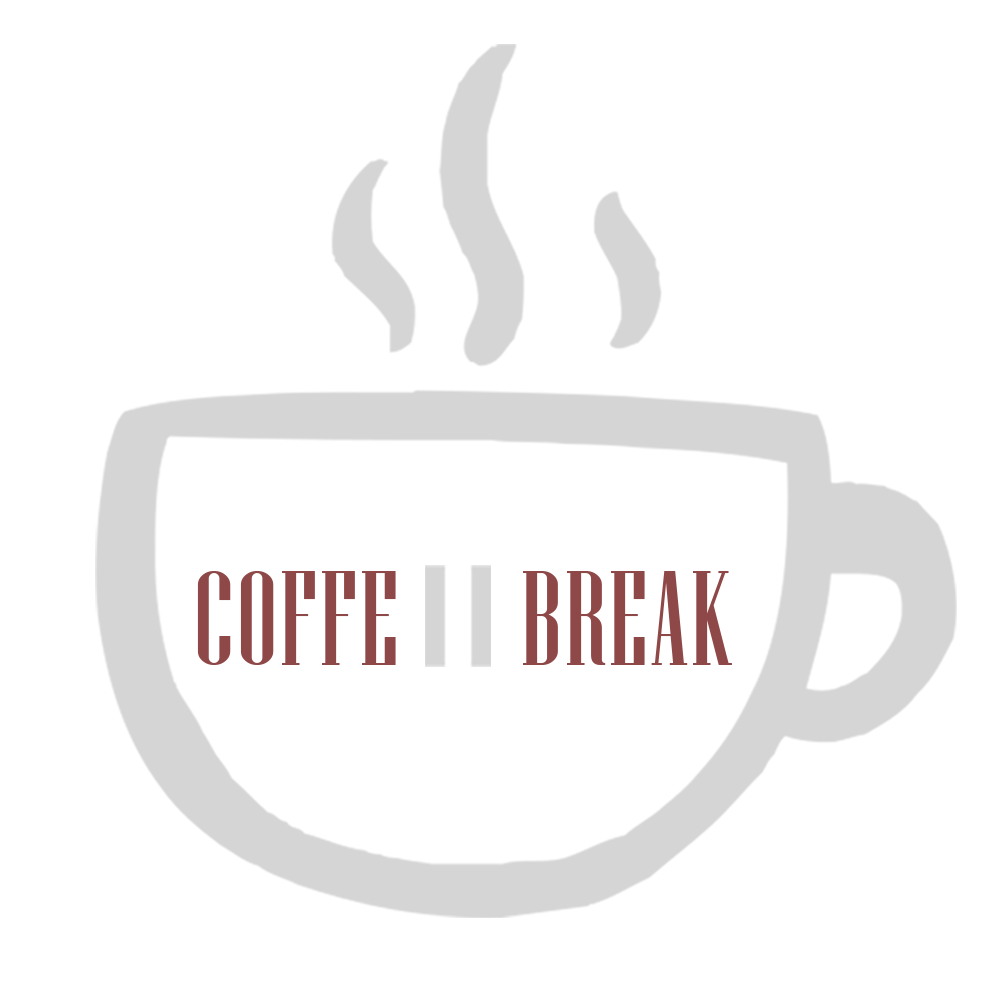
<style>
.page{position:relative;width:1000px;height:1000px;background:#ffffff}
.page>*{position:absolute;margin:0}
.t1{font:134.5px "NiagaraSolid-Reg";letter-spacing:0.02em;color:#8f4848}
</style>
<div class="page">
<p class="t1" style="left:197px;top:571px;width:199px;height:94px">COFFE</p>
<p class="t1" style="left:523px;top:571px;width:209px;height:94px">BREAK</p>
</div>
